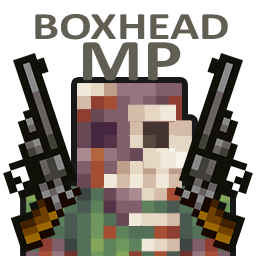
<style>
.page{position:relative;width:256px;height:256px;background:#ffffff}
.page>*{position:absolute;margin:0}
.t1{font:39px "Calibri-Bold";color:#615e54;scale:1.24 1}
.t2{font:59.8px "Calibri-Bold";color:#615e54;scale:1.24 1}
</style>
<div class="page">
<p class="t1" style="left:35px;top:14px;width:193px;height:26px">BOXHEAD</p>
<p class="t2" style="left:83px;top:42px;width:98px;height:39px">MP</p>
</div>
